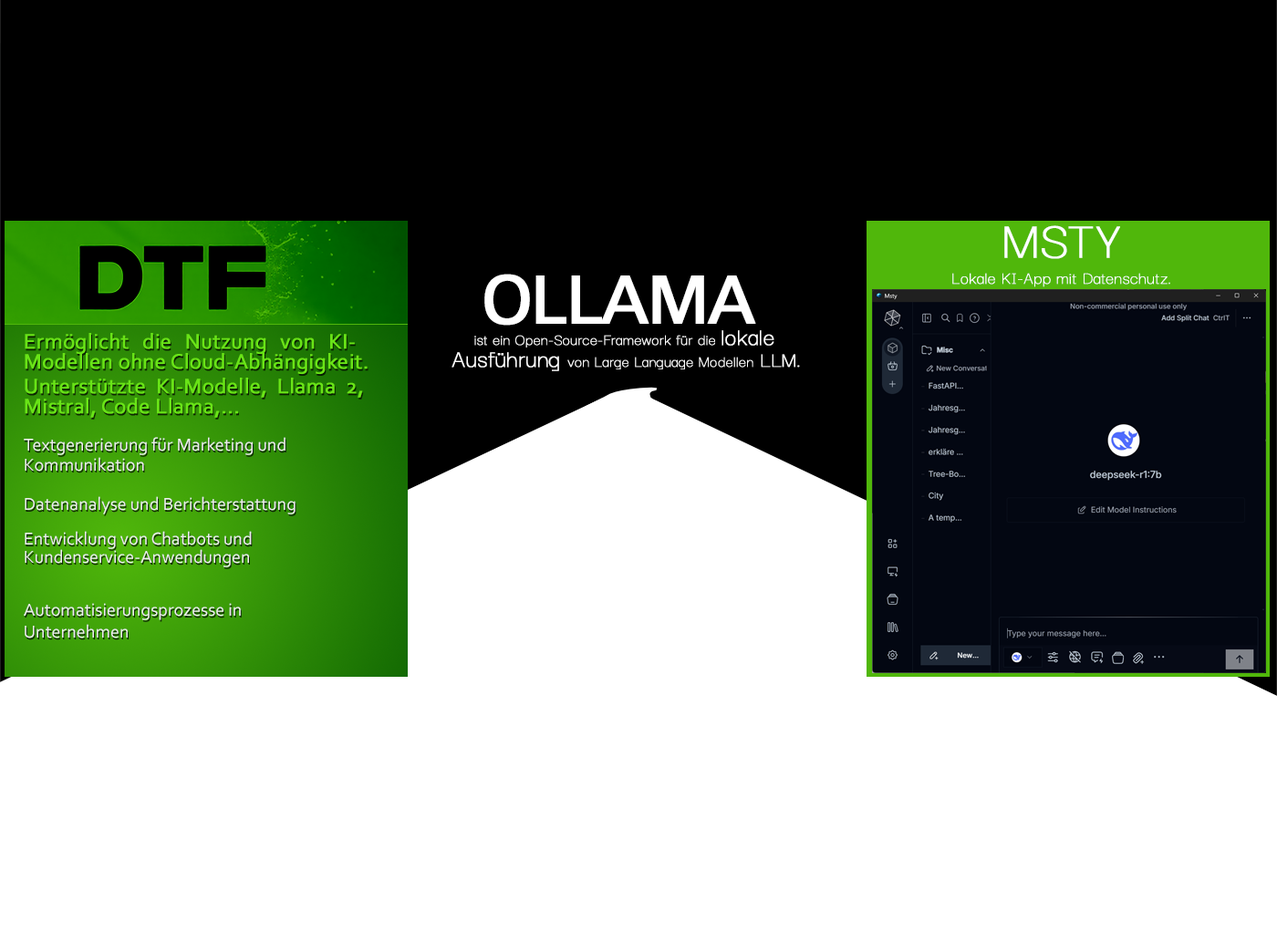
<style>
.page{position:relative;width:1277px;height:934px;background:#ffffff}
.page>*{position:absolute;margin:0}
.t1{font:18.2px/21.9px "DarkerGrotesque-Light";color:#ffffff;font-weight:bold}
.t2{font:54.7px/21.9px "DarkerGrotesque-Light";color:#ffffff;font-weight:bold}
.t3{font:65.7px "Univers";letter-spacing:-0.05em;color:#ffffff;text-transform:uppercase;font-weight:bold}
.t4{font:21.9px/20.1px "Corbel";color:#69e417;font-weight:bold}
.t5{font:18.2px/20.1px "Corbel";color:#eeefee}
.t6{font:18.2px "Corbel";color:#eeefee}
.t7{font:18.2px/18.2px "Corbel";color:#eeefee}
.t8{font:18.2px/21.9px "Corbel";color:#eeefee}
.t9{font:16.4px "DarkerGrotesque-Light";color:#ffffff;font-weight:bold}
.t10{font:25.5px "DarkerGrotesque-Light";color:#ffffff;font-weight:bold}
.t11{font:21.9px "DarkerGrotesque-Light";color:#ffffff;font-weight:bold}
</style>
<div class="page">
<p class="t1" style="left:952px;top:225px;width:218px;height:62px;text-align:center"><span class="t2">MSTY<br></span>Lokale KI-App mit Datenschutz.</p>
<p class="t3" style="left:484px;top:274px;width:272px;height:52px">Ollama</p>
<p class="t4" style="left:24px;top:333px;width:344px;height:305px;text-align:justify">Ermöglicht die Nutzung von KI-Modellen ohne Cloud-Abhängigkeit.<br>Unterstützte KI-Modelle, Llama 2, Mistral, Code Llama,...    <br><br><span class="t5">Textgenerierung für Marketing und <br>Kommunikation<br><br></span><span class="t6">Datenanalyse und Berichterstattung<br><br></span><span class="t7">Entwicklung von Chatbots und Kundenservice-Anwendungen<br><br></span><span class="t8">Automatisierungsprozesse in <br>Unternehmen</span></p>
<p class="t9" style="left:451px;top:330px;width:349px;height:41px">ist ein Open-Source-Framework für die <span class="t10">lokale Ausführung </span>von Large Language Modellen<span class="t11"> LLM.</span></p>
</div>
